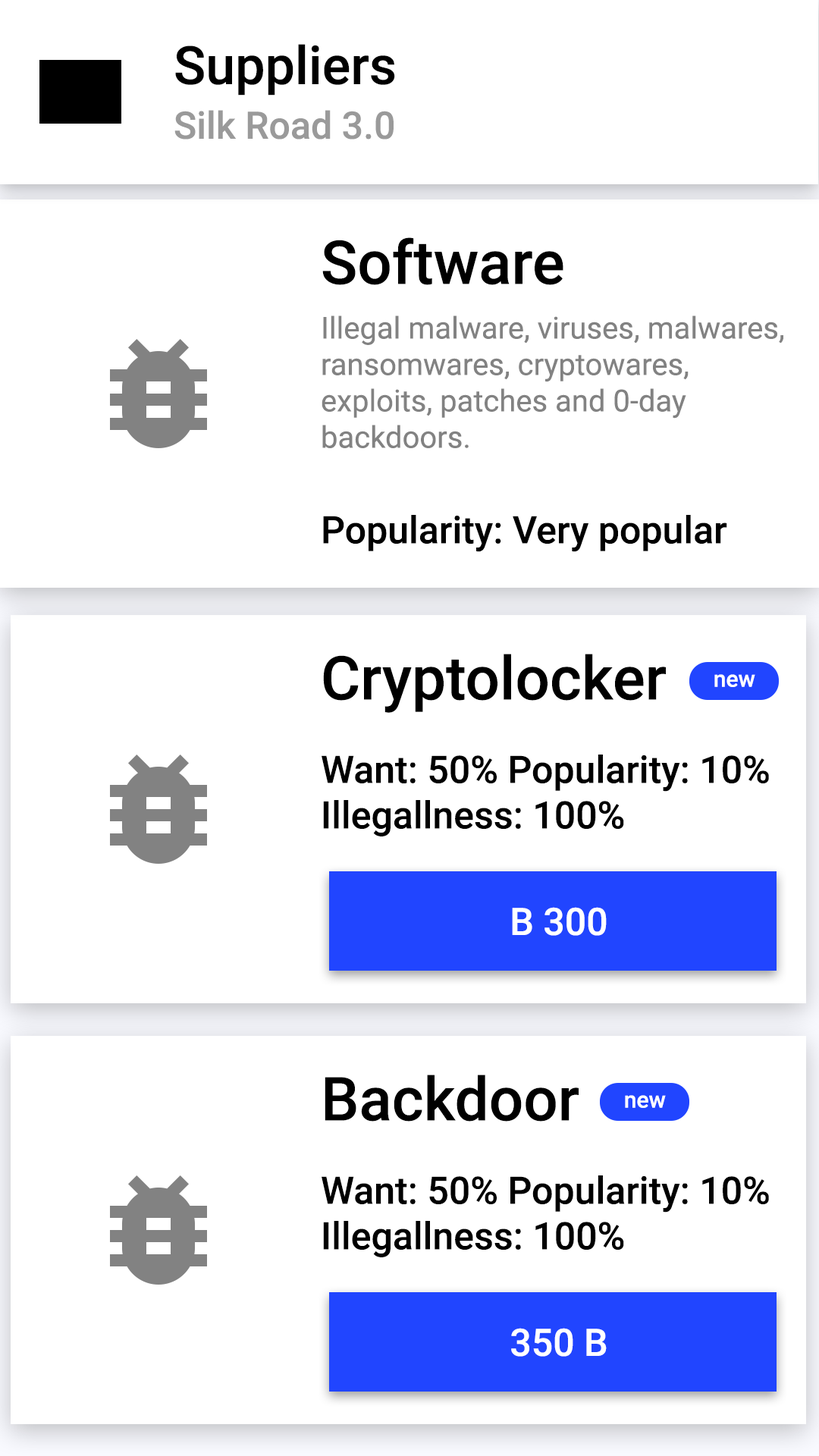
<style>
.page{position:relative;width:819px;height:1456px;background:#ffffff}
.page>*{position:absolute;margin:0}
.t1{font:53.1px "Roboto-Medium";color:#000000}
.t2{font:37.9px "Roboto-Medium";color:#9a9a9a}
.t3{font:60.7px "Roboto-Medium";color:#000000}
.t4{font:30.3px "Roboto-Regular";color:#828282}
.t5{font:37.9px "Roboto-Medium";color:#000000}
.t6{font:22.7px "Roboto-Medium";color:#ffffff}
.t7{font:37.9px "Roboto-Medium";color:#ffffff}
</style>
<div class="page">
<p class="t1" style="left:175px;top:44px;width:220px;height:52px">Suppliers</p>
<p class="t2" style="left:174px;top:110px;width:220px;height:30px">Silk Road 3.0</p>
<p class="t3" style="left:322px;top:237px;width:241px;height:48px">Software</p>
<p class="t4" style="left:322px;top:315px;width:461px;height:133px;text-align:right">Illegal malware, viruses, malwares,<br>ransomwares, cryptowares,<br>exploits, patches and 0-day<br>backdoors.</p>
<p class="t5" style="left:323px;top:515px;width:404px;height:37px">Popularity: Very popular</p>
<p class="t3" style="left:323px;top:654px;width:343px;height:59px">Cryptolocker</p>
<p class="t6" style="left:714px;top:674px;width:41px;height:13px">new</p>
<p class="t5" style="left:322px;top:755px;width:447px;height:81px;text-align:right">Want: 50% Popularity: 10%<br>Illegallness: 100%</p>
<p class="t7" style="left:512px;top:907px;width:95px;height:29px">B 300</p>
<p class="t3" style="left:325px;top:1075px;width:254px;height:47px">Backdoor</p>
<p class="t6" style="left:625px;top:1095px;width:41px;height:13px">new</p>
<p class="t5" style="left:322px;top:1175px;width:447px;height:82px;text-align:right">Want: 50% Popularity: 10%<br>Illegallness: 100%</p>
<p class="t7" style="left:511px;top:1328px;width:96px;height:29px">350 B</p>
</div>
